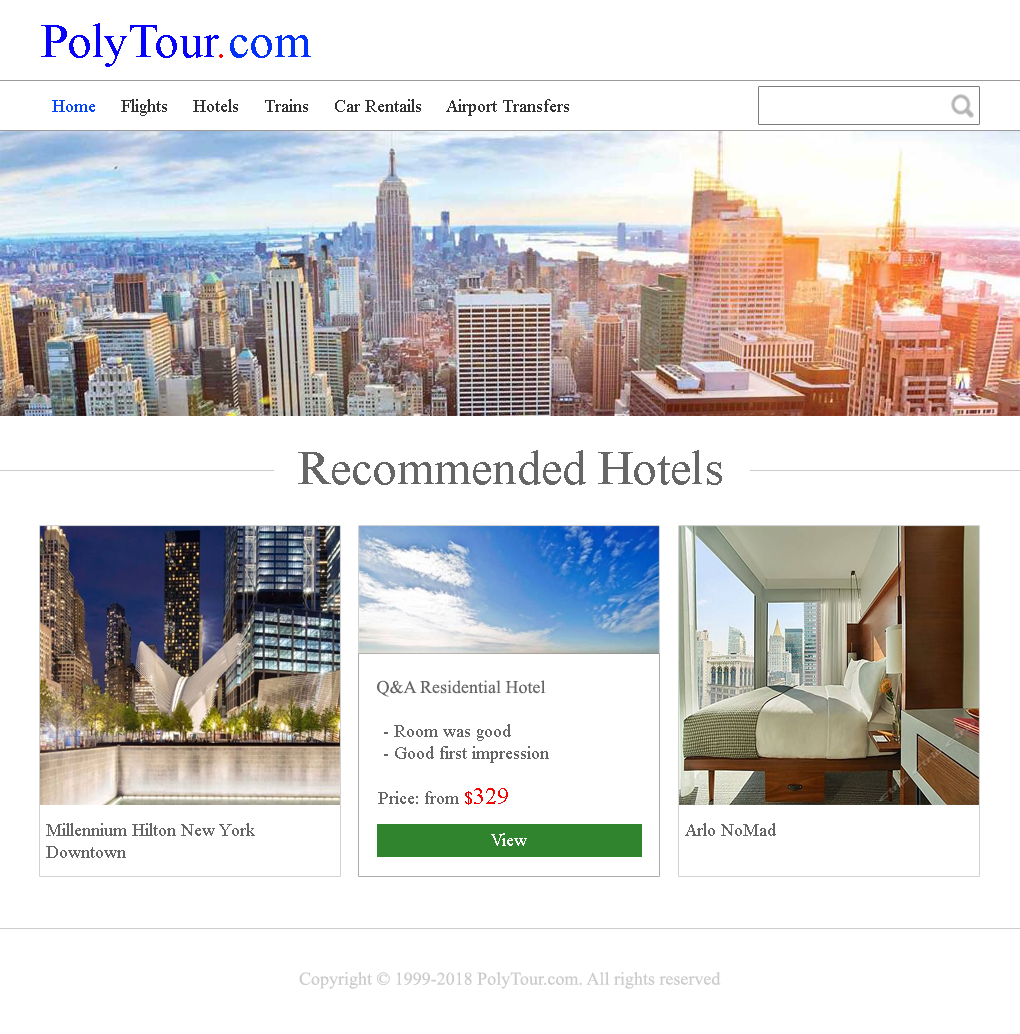
<style>
.page{position:relative;width:1020px;height:1034px;background:#ffffff}
.page>*{position:absolute;margin:0}
.t1{font:48px "TimesNewRomanPSMT";color:#0701fc}
.t2{font:48px "TimesNewRomanPSMT";color:#ff0000}
.t3{font:48px "TimesNewRomanPSMT";color:#0231fb}
.t4{font:18px "TimesNewRomanPSMT";color:#333333}
.t5{font:18px "TimesNewRomanPSMT";color:#0444fd}
.t6{font:48px "TimesNewRomanPSMT";color:#666666}
.t7{font:18px "TimesNewRomanPSMT";color:#666666}
.t8{font:18px "TimesNewRomanPSMT";color:#f70202}
.t9{font:24px "TimesNewRomanPSMT";color:#f70202}
.t10{font:18px "TimesNewRomanPSMT";color:#fcfdfc}
.t11{font:18px "TimesNewRomanPSMT";color:#cccccc}
</style>
<div class="page">
<p class="t1" style="left:41px;top:23px;width:270px;height:44px">PolyTour<span class="t2">.</span><span class="t3">com</span></p>
<p class="t4" style="left:52px;top:99px;width:517px;height:17px"><span class="t5">Home</span>     Flights     Hotels     Trains     Car Rentails     Airport Transfers</p>
<p class="t6" style="left:298px;top:450px;width:424px;height:35px">Recommended Hotels</p>
<p class="t7" style="left:377px;top:680px;width:169px;height:17px">Q&amp;A Residential Hotel</p>
<p class="t7" style="left:384px;top:724px;width:165px;height:39px">- Room was good<br>- Good first impression</p>
<p class="t7" style="left:378px;top:788px;width:130px;height:17px">Price: from <span class="t8">$</span><span class="t9">329</span></p>
<p class="t7" style="left:46px;top:823px;width:209px;height:35px">Millennium Hilton New York <br>Downtown</p>
<p class="t10" style="left:491px;top:833px;width:36px;height:13px">View</p>
<p class="t7" style="left:685px;top:823px;width:91px;height:13px">Arlo NoMad</p>
<p class="t11" style="left:299px;top:972px;width:422px;height:17px">Copyright © 1999-2018 PolyTour.com. All rights reserved</p>
</div>
